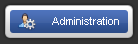
<style>
.page{position:relative;width:138px;height:44px}
.page>*{position:absolute;margin:0}
.t1{font:11px "ArialMT";color:#fffefe}
</style>
<div class="page">
<p class="t1" style="left:52px;top:17px;width:67px;height:8px">Administration</p>
</div>
